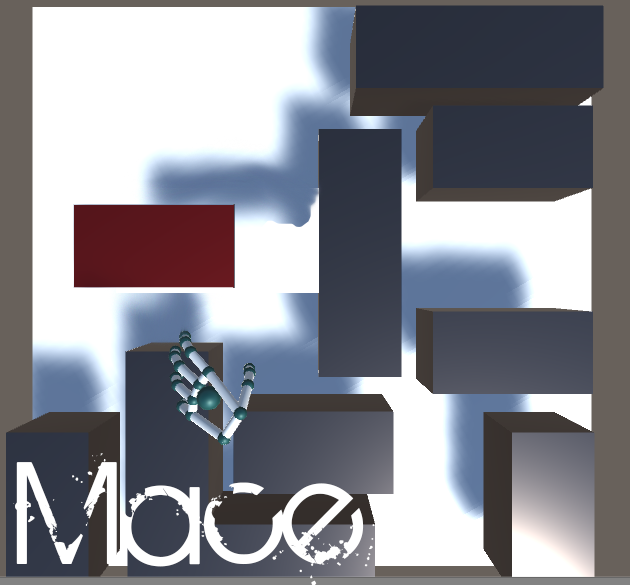
<style>
.page{position:relative;width:630px;height:585px;background:#ffffff}
.page>*{position:absolute;margin:0}
.t1{font:159px "BIRTHOFAHERO";color:#ffffff}
</style>
<div class="page">
<p class="t1" style="left:13px;top:453px;width:362px;height:133px">Mace</p>
</div>
